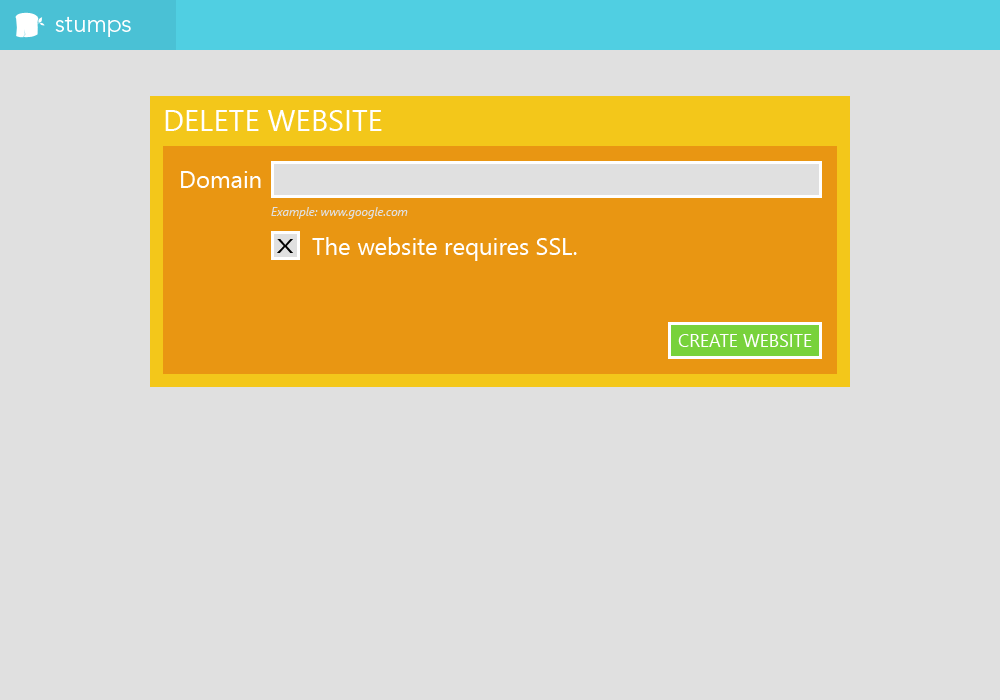
<style>
.page{position:relative;width:1000px;height:700px;background:#e0e0e0}
.page>*{position:absolute;margin:0}
.t1{font:24px "Avenir-Light";color:#ffffff}
.t2{font:30px "SegoeUI";color:#ffffff}
.t3{font:24px "SegoeUI";color:#ffffff}
.t4{font:12px "SegoeUI-Italic";color:#e0e0e0}
.t5{font:20.4px "SegoeUI";color:#000000;scale:1.44 1}
.t6{font:18px "SegoeUI";color:#ffffff}
</style>
<div class="page">
<p class="t1" style="left:55px;top:16px;width:76px;height:21px">stumps</p>
<p class="t2" style="left:165px;top:110px;width:217px;height:21px">DELETE WEBSITE</p>
<p class="t3" style="left:181px;top:171px;width:80px;height:17px">Domain</p>
<p class="t4" style="left:271px;top:207px;width:137px;height:12px">Example: www.google.com</p>
<p class="t5" style="left:277px;top:239px;width:16px;height:14px">X</p>
<p class="t3" style="left:312px;top:237px;width:265px;height:24px">The website requires SSL.</p>
<p class="t6" style="left:678px;top:334px;width:134px;height:13px">CREATE WEBSITE</p>
</div>
